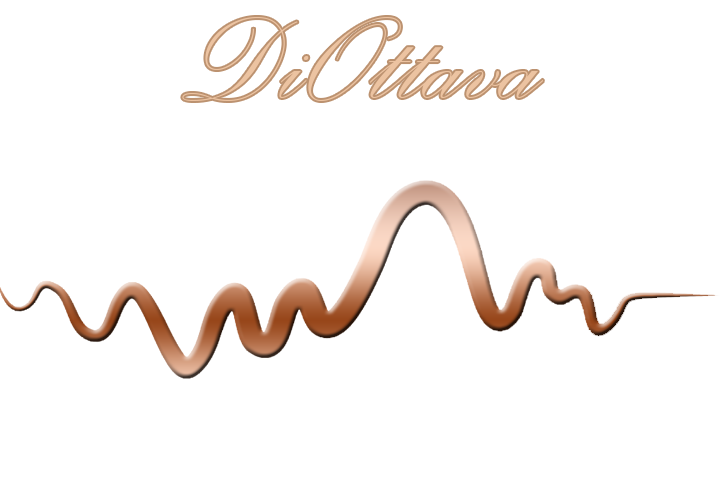
<style>
.page{position:relative;width:720px;height:480px;background:#ffffff}
.page>*{position:absolute;margin:0}
.t1{font:150px "PalaceScriptMT";color:#ecc3a1}
</style>
<div class="page">
<p class="t1" style="left:182px;top:17px;width:361px;height:84px">DiOttava</p>
</div>
